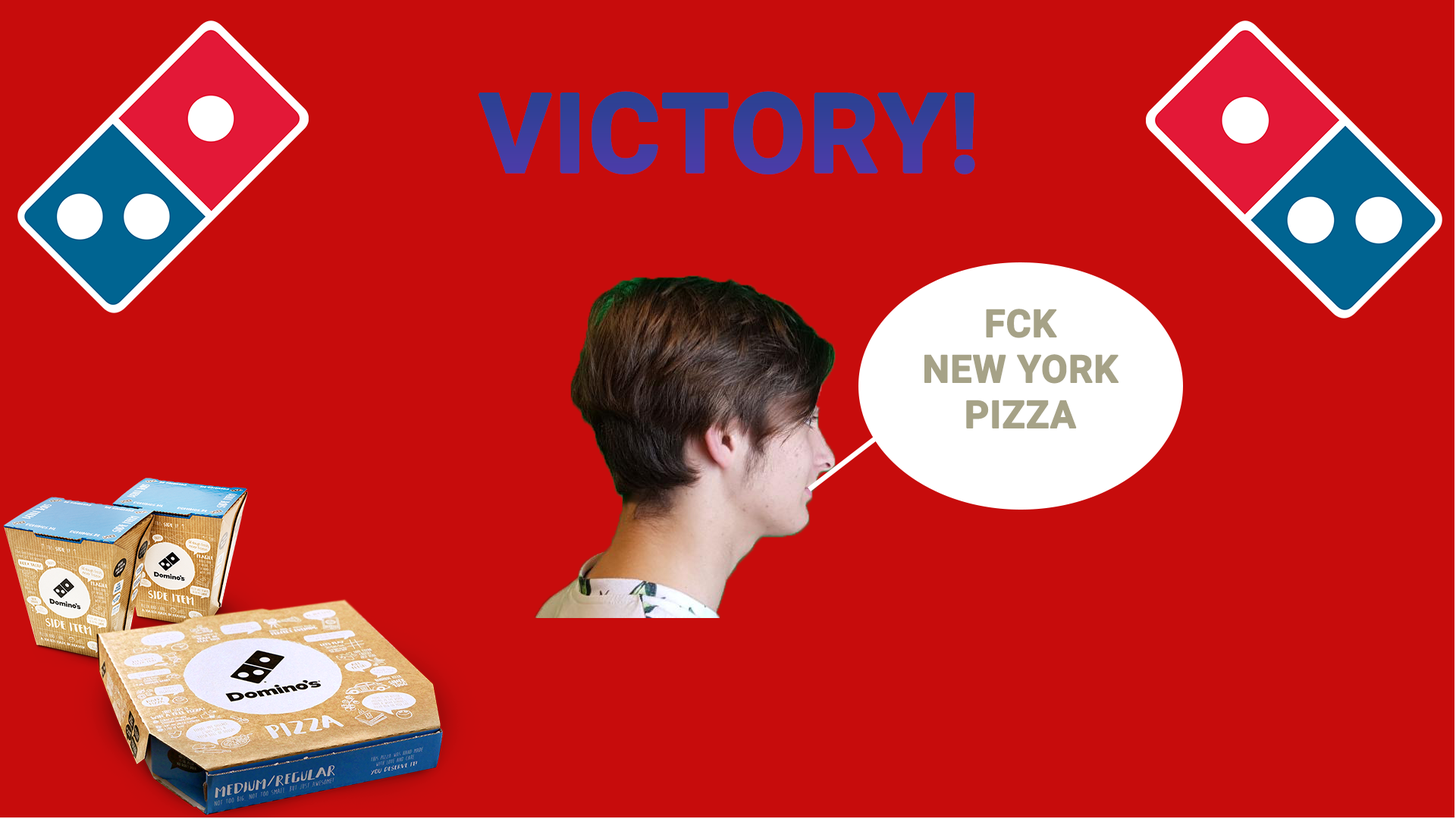
<style>
.page{position:relative;width:1456px;height:819px;background:#c70c0c}
.page>*{position:absolute;margin:0}
.t1{font:109.2px "Roboto-Bold";color:#393f9c;text-transform:uppercase;font-weight:bold}
.t2{font:37.9px "Roboto-Bold";color:#a6a287;text-transform:uppercase;font-weight:bold}
</style>
<div class="page">
<p class="t1" style="left:478px;top:91px;width:497px;height:83px">VICTORY!</p>
<p class="t2" style="left:924px;top:309px;width:195px;height:119px;text-align:center">fck<br>New York Pizza</p>
</div>
